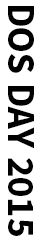
<style>
.page{position:relative;width:42px;height:243px;background:#ffffff}
.page>*{position:absolute;margin:0}
.t1{font:38.6px "SourceSansPro-Bold";color:#000000}
</style>
<div class="page">
<p class="t1" style="left:8px;top:6px;width:26px;height:230px;rotate:90deg">DOS DAY 2015</p>
</div>
